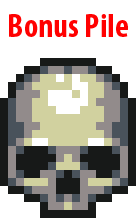
<style>
.page{position:relative;width:136px;height:218px;background:#ffffff}
.page>*{position:absolute;margin:0}
.t1{font:33.3px "MyriadPro-BoldCond";color:#ff0101}
</style>
<div class="page">
<p class="t1" style="left:9px;top:14px;width:119px;height:23px">Bonus Pile</p>
</div>
